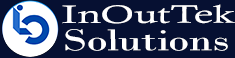
<style>
.page{position:relative;width:235px;height:58px;background:#061032}
.page>*{position:absolute;margin:0}
.t1{font:25.5px "CalistoMT";letter-spacing:-0.005em;color:#ffffff;scale:1.68 1}
.t2{font:31.4px "BodoniMT";letter-spacing:-0.005em;color:#ffffff;scale:1.4 1}
</style>
<div class="page">
<p class="t1" style="left:62px;top:4px;width:173px;height:20px">InOutTek</p>
<p class="t2" style="left:65px;top:29px;width:163px;height:22px">Solutions</p>
</div>
